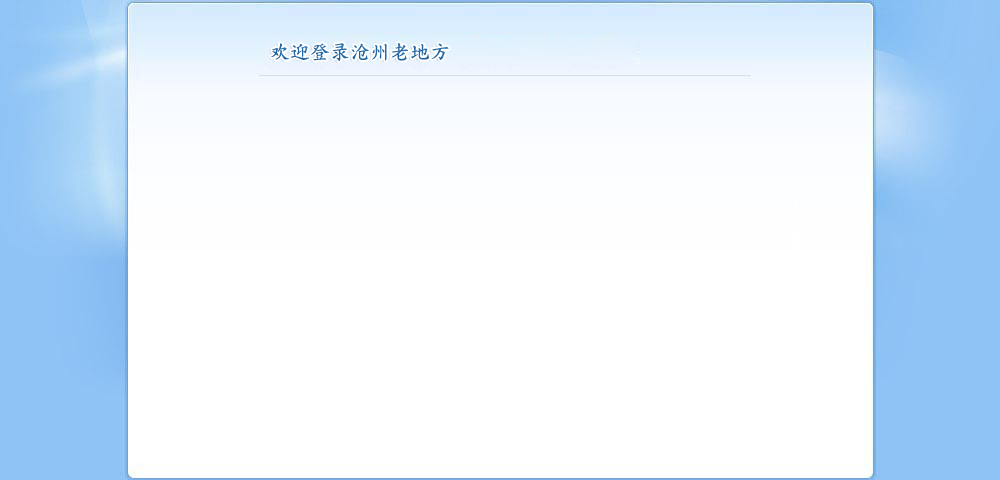
<style>
.page{position:relative;width:1000px;height:480px;background:#ffffff}
.page>*{position:absolute;margin:0}
.t1{font:20px "DFKaiW5-A";color:#236aa8}
</style>
<div class="page">
<p class="t1" style="left:271px;top:43px;width:178px;height:18px">欢迎登录沧州老地方</p>
</div>
